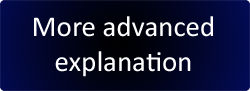
<style>
.page{position:relative;width:250px;height:91px}
.page>*{position:absolute;margin:0}
.t1{font:29.1px "Calibri";color:#ffffff}
</style>
<div class="page">
<p class="t1" style="left:34px;top:16px;width:179px;height:61px;text-align:center">More advanced<br>explanation</p>
</div>
